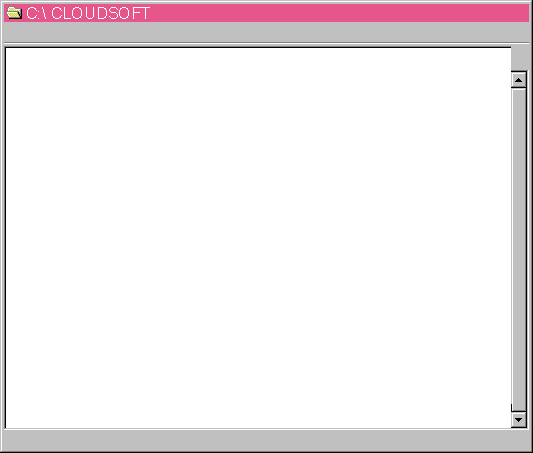
<style>
.page{position:relative;width:533px;height:453px;background:#ffffff}
.page>*{position:absolute;margin:0}
.t1{font:16.3px "MicrosoftSansSerif";color:#ffffff}
</style>
<div class="page">
<p class="t1" style="left:27px;top:7px;width:123px;height:12px">C:\ CLOUDSOFT</p>
</div>
